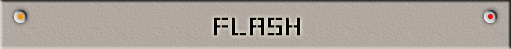
<style>
.page{position:relative;width:511px;height:49px}
.page>*{position:absolute;margin:0}
.t1{font:24px "Year2000";color:#040404;font-weight:bold}
</style>
<div class="page">
<p class="t1" style="left:214px;top:17px;width:86px;height:19px">FLASH</p>
</div>
